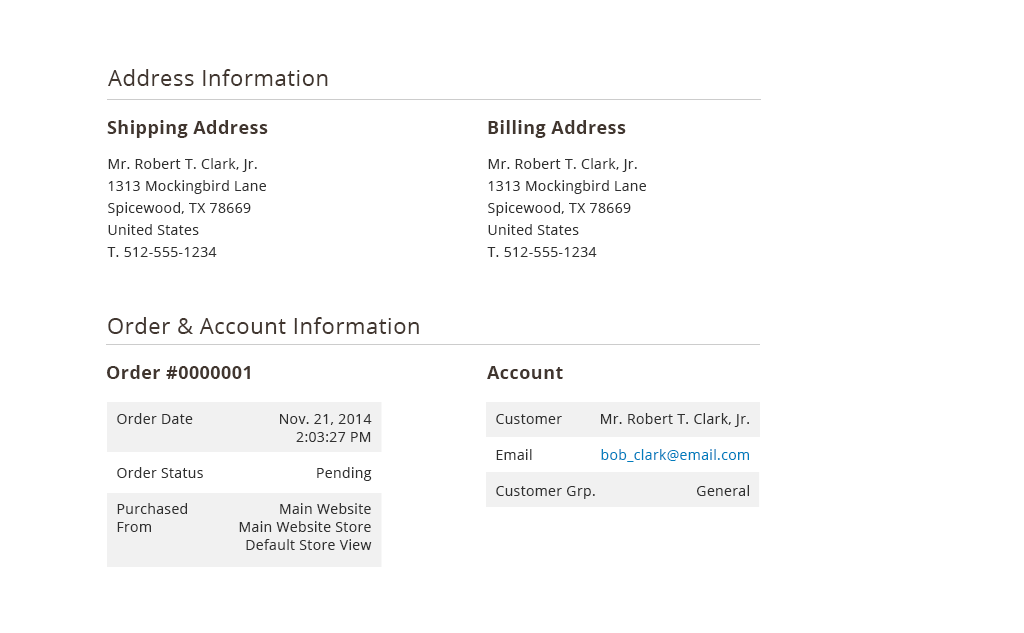
<style>
.page{position:relative;width:1024px;height:633px;background:#ffffff}
.page>*{position:absolute;margin:0}
.t1{font:22px "OpenSans";letter-spacing:0.025em;color:#41362f}
.t2{font:18px "OpenSans-Bold";letter-spacing:0.025em;color:#41362f}
.t3{font:14px/22px "OpenSans";letter-spacing:0.025em;color:#303030}
.t4{font:14px/36px "OpenSans";letter-spacing:0.025em;color:#303030}
.t5{font:14px/18px "OpenSans";letter-spacing:0.025em;color:#303030}
.t6{font:14px/36px "OpenSans";letter-spacing:0.025em;color:#007dbd}
</style>
<div class="page">
<p class="t1" style="left:108px;top:69px;width:220px;height:17px">Address Information</p>
<p class="t2" style="left:107px;top:120px;width:161px;height:18px">Shipping Address</p>
<p class="t2" style="left:488px;top:120px;width:138px;height:18px">Billing Address</p>
<p class="t3" style="left:107px;top:158px;width:159px;height:99px">Mr. Robert T. Clark, Jr.<br>1313 Mockingbird Lane<br>Spicewood, TX 78669<br>United States<br>T. 512-555-1234</p>
<p class="t3" style="left:487px;top:158px;width:159px;height:99px">Mr. Robert T. Clark, Jr.<br>1313 Mockingbird Lane<br>Spicewood, TX 78669<br>United States<br>T. 512-555-1234</p>
<p class="t1" style="left:108px;top:317px;width:311px;height:17px">Order &amp; Account Information</p>
<p class="t2" style="left:107px;top:365px;width:143px;height:14px">Order #0000001</p>
<p class="t2" style="left:487px;top:366px;width:76px;height:13px">Account</p>
<p class="t4" style="left:117px;top:413px;width:86px;height:119px">Order Date<br><br>Order Status<br>Purchased <br><span class="t5">From</span></p>
<p class="t5" style="left:239px;top:414px;width:133px;height:136px;text-align:right"><span class="t4">Nov. 21, 2014<br></span>2:03:27 PM<br><span class="t4">Pending<br>Main Website<br></span>Main Website Store<br>Default Store View</p>
<p class="t4" style="left:496px;top:414px;width:99px;height:85px">Customer<br>Email<br>Customer Grp.</p>
<p class="t4" style="left:601px;top:413px;width:148px;height:83px;text-align:right">Mr. Robert T. Clark, Jr.<br><span class="t6">bob_clark@email.com<br></span>General</p>
</div>
